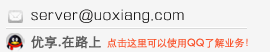
<style>
.page{position:relative;width:270px;height:52px;background:#f5f5f5}
.page>*{position:absolute;margin:0}
.t1{font:14px "FZXQJW--GB1-0";letter-spacing:0.08em;color:#131212}
.t2{font:13px "STXihei";color:#5d5d5d;font-weight:bold}
.t3{font:10px "STXihei";color:#f9532c}
</style>
<div class="page">
<p class="t1" style="left:31px;top:9px;width:153px;height:14px">server@uoxiang.com</p>
<p class="t2" style="left:31px;top:35px;width:70px;height:14px">优享.在路上</p>
<p class="t3" style="left:107px;top:38px;width:141px;height:10px">点击这里可以使用QQ了解业务！</p>
</div>
